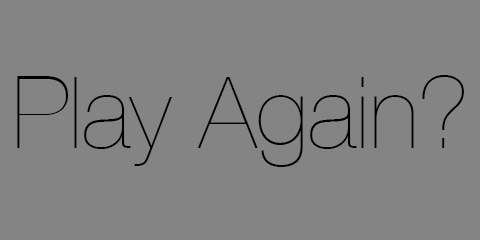
<style>
.page{position:relative;width:480px;height:240px;background:#848484}
.page>*{position:absolute;margin:0}
.t1{font:100px "HelveticaNeue-UltraLight";color:#000000}
</style>
<div class="page">
<p class="t1" style="left:17px;top:75px;width:447px;height:92px">Play Again?</p>
</div>
